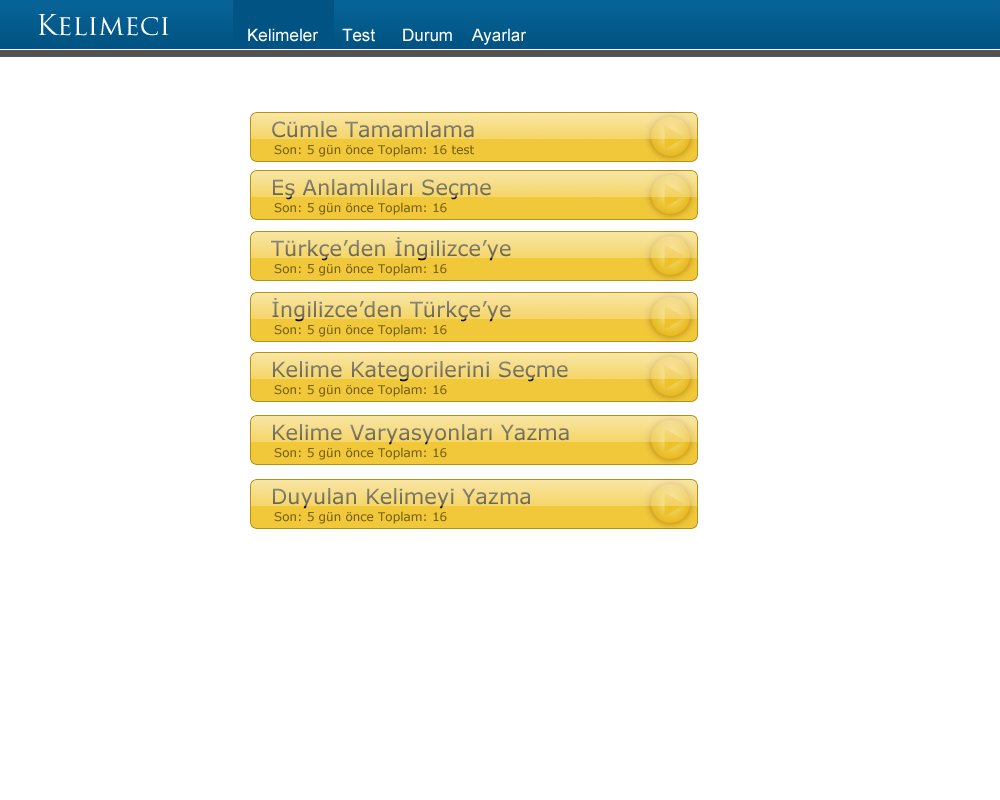
<style>
.page{position:relative;width:1000px;height:800px;background:#ffffff}
.page>*{position:absolute;margin:0}
.t1{font:28px "TrajanPro-Regular";color:#ffffff}
.t2{font:17px "ArialMT";color:#ffffff}
.t3{font:21px "Verdana";color:#787465}
.t4{font:12px "Verdana";color:#796212}
</style>
<div class="page">
<p class="t1" style="left:38px;top:14px;width:131px;height:22px">Kelimeci</p>
<p class="t2" style="left:248px;top:28px;width:71px;height:14px">Kelimeler</p>
<p class="t2" style="left:342px;top:28px;width:33px;height:14px">Test</p>
<p class="t2" style="left:403px;top:28px;width:49px;height:14px">Durum</p>
<p class="t2" style="left:471px;top:28px;width:56px;height:17px">Ayarlar</p>
<p class="t3" style="left:272px;top:121px;width:202px;height:17px">Cümle Tamamlama</p>
<p class="t4" style="left:274px;top:144px;width:200px;height:13px">Son: 5 gün önce Toplam: 16 test</p>
<p class="t3" style="left:273px;top:179px;width:218px;height:21px">Eş Anlamlıları Seçme</p>
<p class="t4" style="left:274px;top:202px;width:173px;height:13px">Son: 5 gün önce Toplam: 16</p>
<p class="t3" style="left:271px;top:237px;width:240px;height:24px">Türkçe’den İngilizce’ye</p>
<p class="t4" style="left:274px;top:263px;width:173px;height:13px">Son: 5 gün önce Toplam: 16</p>
<p class="t3" style="left:272px;top:298px;width:239px;height:24px">İngilizce’den Türkçe’ye</p>
<p class="t4" style="left:274px;top:324px;width:173px;height:13px">Son: 5 gün önce Toplam: 16</p>
<p class="t3" style="left:273px;top:361px;width:295px;height:21px">Kelime Kategorilerini Seçme</p>
<p class="t4" style="left:274px;top:384px;width:173px;height:13px">Son: 5 gün önce Toplam: 16</p>
<p class="t3" style="left:273px;top:424px;width:296px;height:21px">Kelime Varyasyonları Yazma</p>
<p class="t4" style="left:274px;top:447px;width:173px;height:13px">Son: 5 gün önce Toplam: 16</p>
<p class="t3" style="left:273px;top:488px;width:257px;height:21px">Duyulan Kelimeyi Yazma</p>
<p class="t4" style="left:274px;top:511px;width:173px;height:13px">Son: 5 gün önce Toplam: 16</p>
</div>
